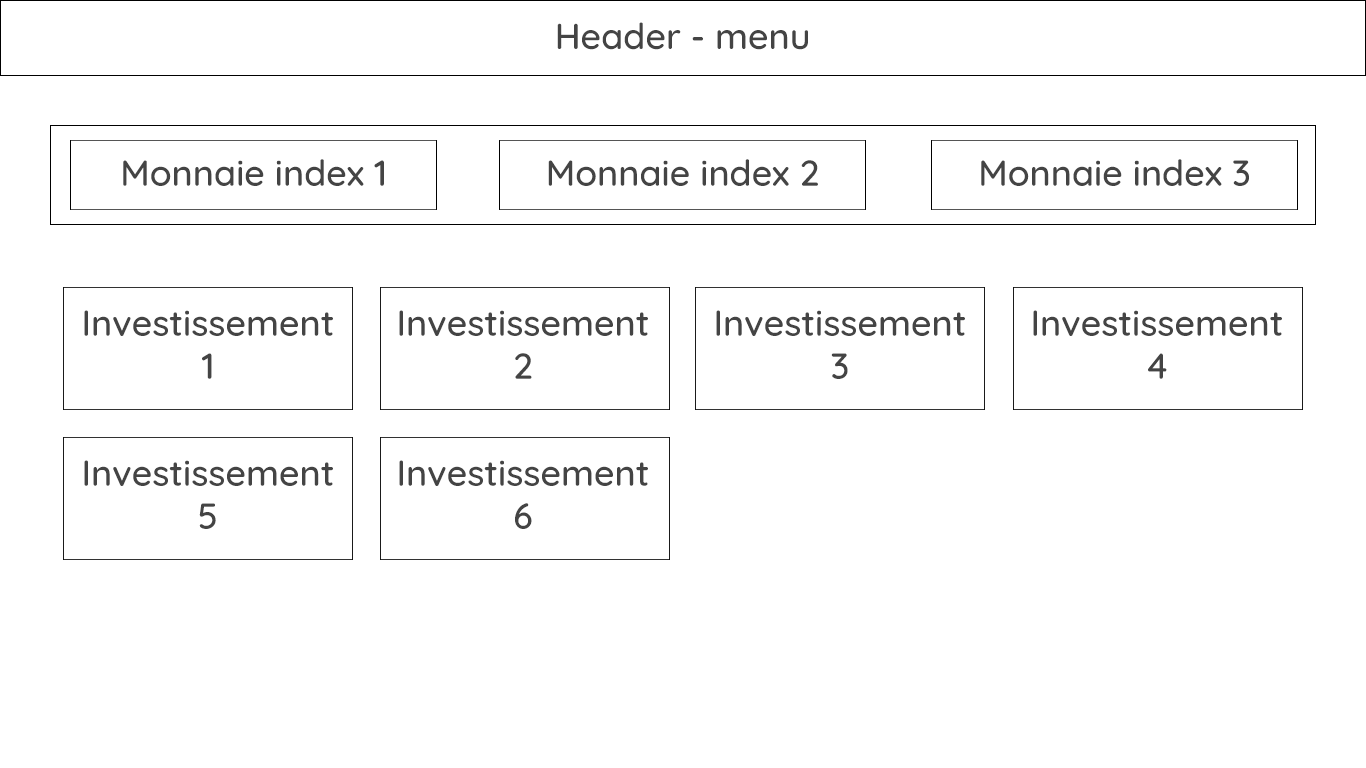
<style>
.page{position:relative;width:1366px;height:768px;background:#ffffff}
.page>*{position:absolute;margin:0}
.t1{font:36px "Quicksand-Medium";color:#444444}
</style>
<div class="page">
<p class="t1" style="left:557px;top:22px;width:251px;height:28px">Header - menu</p>
<p class="t1" style="left:123px;top:159px;width:261px;height:27px">Monnaie index 1</p>
<p class="t1" style="left:548px;top:159px;width:270px;height:27px">Monnaie index 2</p>
<p class="t1" style="left:981px;top:159px;width:268px;height:27px">Monnaie index 3</p>
<p class="t1" style="left:84px;top:310px;width:249px;height:69px;text-align:center">Investissement<br>1</p>
<p class="t1" style="left:399px;top:310px;width:249px;height:69px;text-align:center">Investissement<br>2</p>
<p class="t1" style="left:716px;top:310px;width:249px;height:69px;text-align:center">Investissement<br>3</p>
<p class="t1" style="left:1033px;top:310px;width:249px;height:69px;text-align:center">Investissement<br>4</p>
<p class="t1" style="left:84px;top:460px;width:249px;height:69px;text-align:center">Investissement<br>5</p>
<p class="t1" style="left:399px;top:460px;width:249px;height:69px;text-align:center">Investissement<br>6</p>
</div>
